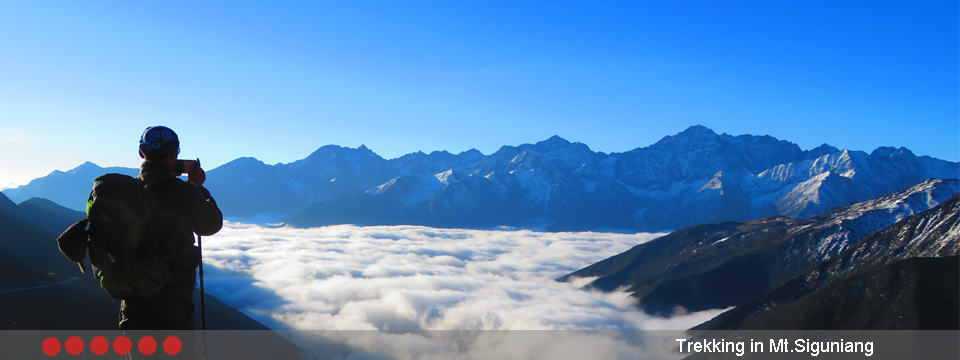
<style>
.page{position:relative;width:960px;height:360px}
.page>*{position:absolute;margin:0}
.t1{font:18px "ArialMT";color:#ffffff}
</style>
<div class="page">
<p class="t1" style="left:676px;top:339px;width:197px;height:17px">Trekking in Mt.Siguniang</p>
</div>
